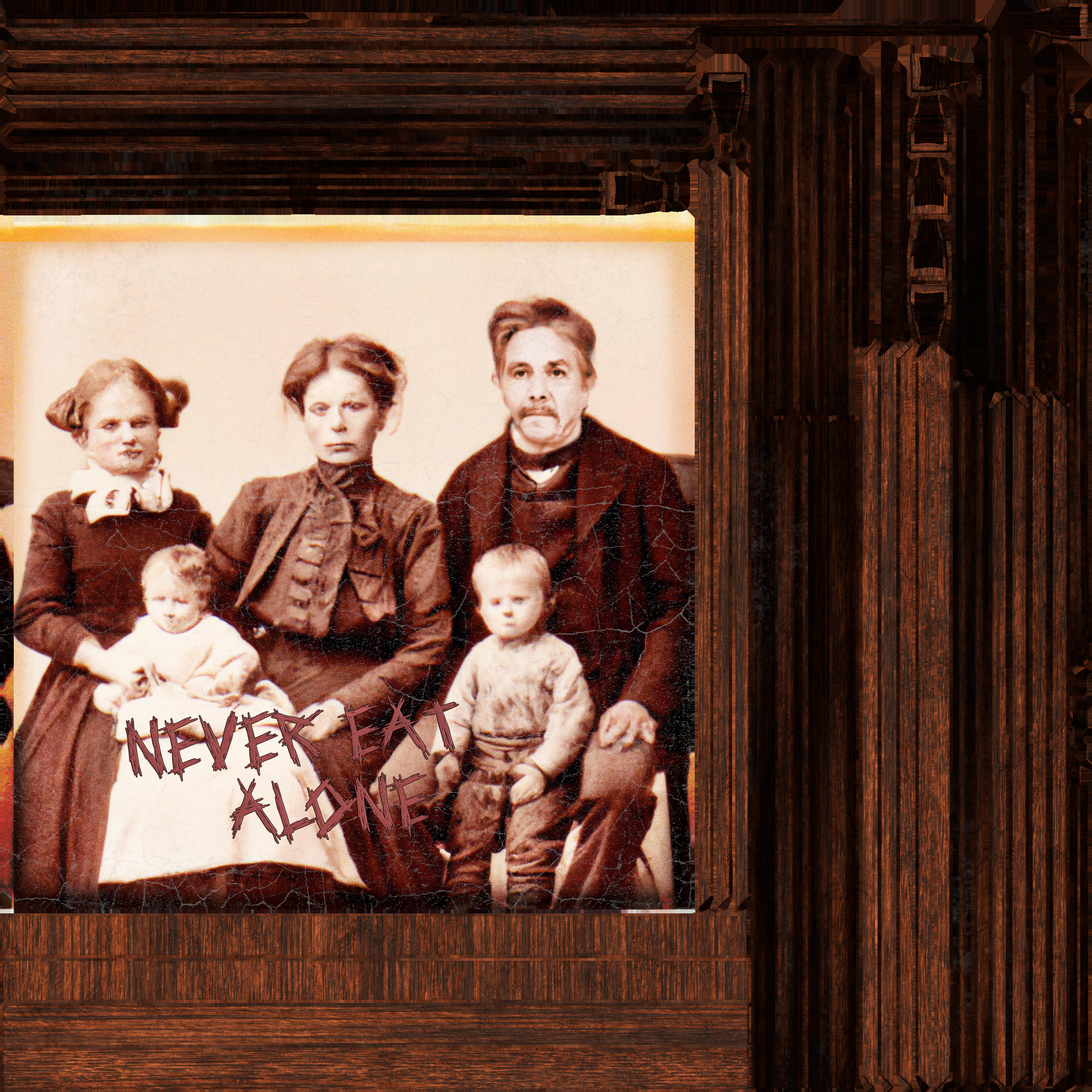
<style>
.page{position:relative;width:1092px;height:1092px}
.page>*{position:absolute;margin:0}
.t1{font:60.8px "HelpMe";color:#a04b4b}
</style>
<div class="page">
<p class="t1" style="left:125px;top:694px;width:334px;height:150px;text-align:center;rotate:-4deg">NEVER EAT<br>  ALONE</p>
</div>
